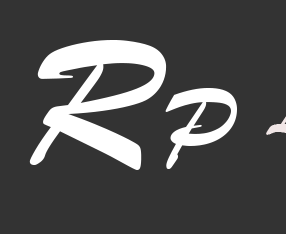
<style>
.page{position:relative;width:286px;height:234px;background:#333333}
.page>*{position:absolute;margin:0}
.t1{font:190.7px "BrushScriptMT";color:#ffffff}
.t2{font:112.7px "BrushScriptMT";color:#ffffff}
</style>
<div class="page">
<p class="t1" style="left:29px;top:40px;width:138px;height:130px">R</p>
<p class="t2" style="left:165px;top:88px;width:72px;height:81px">P</p>
</div>
